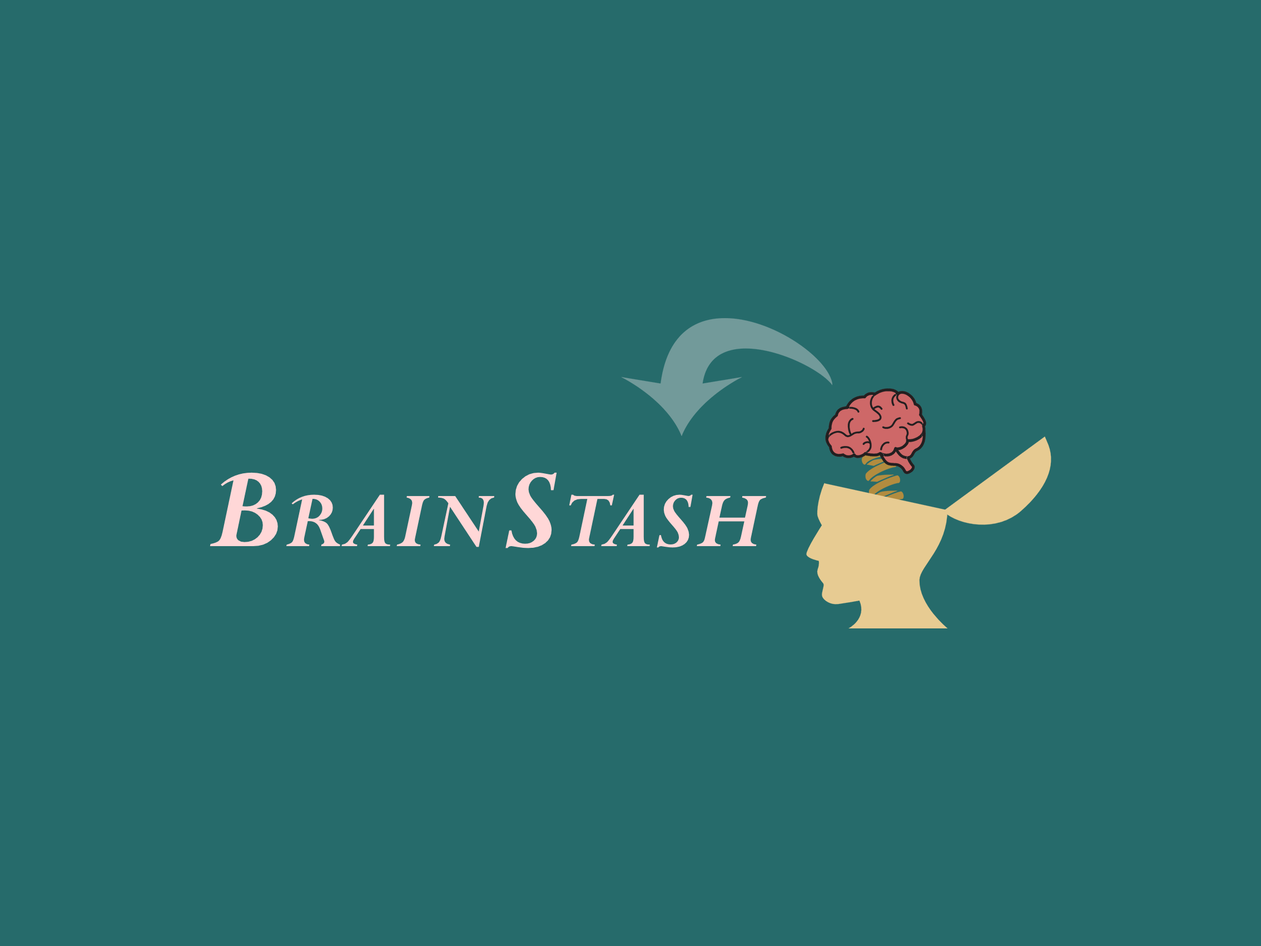
<style>
.page{position:relative;width:1261px;height:946px;background:#266b6b}
.page>*{position:absolute;margin:0}
.t1{font:126px "Perpetua-BoldItalic";letter-spacing:0.02em;color:#ffd7d7;font-variant:small-caps}
.t2{font:126px "Perpetua-BoldItalic";letter-spacing:0.14em;color:#ffd7d7;font-variant:small-caps}
</style>
<div class="page">
<p class="t1" style="left:210px;top:472px;width:556px;height:76px">Brai<span class="t2">n</span>Stash</p>
</div>
